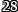
<style>
.page{position:relative;width:18px;height:12px;background:#ffffff}
.page>*{position:absolute;margin:0}
.t1{font:17px "Perpetua-Bold";color:#ffffff}
</style>
<div class="page">
<p class="t1" style="left:2px;top:1px;width:16px;height:10px;opacity:0.7">28</p>
</div>
